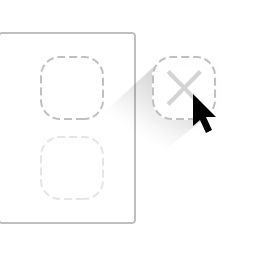
<style>
.page{position:relative;width:256px;height:256px;background:#ffffff}
.page>*{position:absolute;margin:0}
.t1{font:68.6px "MyriadPro-Regular";color:#d4d4d4}
</style>
<div class="page">
<p class="t1" style="left:166px;top:70px;width:36px;height:36px">×</p>
</div>
